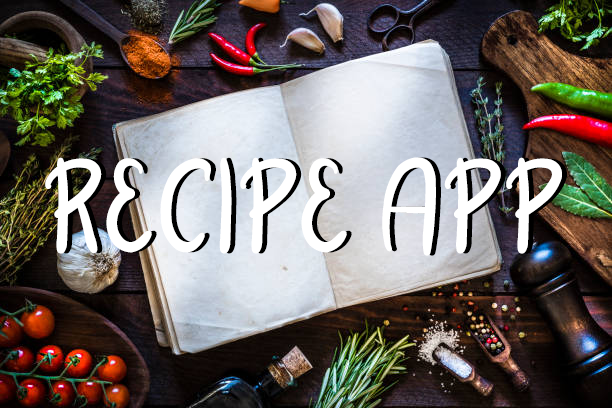
<style>
.page{position:relative;width:612px;height:408px}
.page>*{position:absolute;margin:0}
.t1{font:80.1px "BigPriceDemoRegular";color:#ffffff;text-transform:uppercase}
</style>
<div class="page">
<p class="t1" style="left:45px;top:157px;width:517px;height:99px">RECIPE APP</p>
</div>
